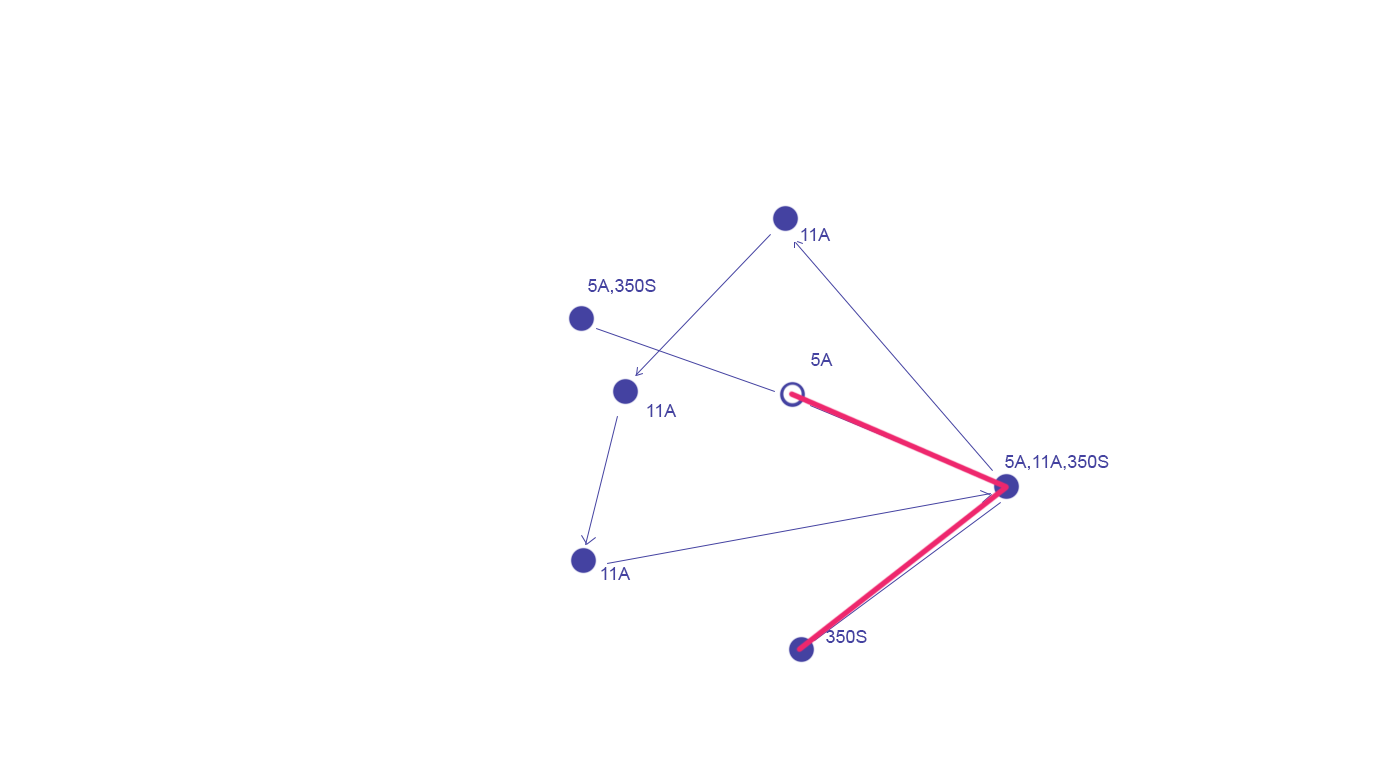
<style>
.page{position:relative;width:1396px;height:780px;background:#ffffff}
.page>*{position:absolute;margin:0}
.t1{font:18px "ArialMT";color:#4442a1}
</style>
<div class="page">
<p class="t1" style="left:801px;top:228px;width:30px;height:13px">11A</p>
<p class="t1" style="left:588px;top:279px;width:68px;height:15px">5A,350S</p>
<p class="t1" style="left:811px;top:353px;width:22px;height:13px">5A</p>
<p class="t1" style="left:647px;top:404px;width:30px;height:13px">11A</p>
<p class="t1" style="left:1005px;top:455px;width:104px;height:15px">5A,11A,350S</p>
<p class="t1" style="left:601px;top:567px;width:30px;height:13px">11A</p>
<p class="t1" style="left:826px;top:630px;width:41px;height:13px">350S</p>
</div>
